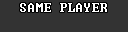
<style>
.page{position:relative;width:128px;height:32px;background:#333333}
.page>*{position:absolute;margin:0}
.t1{font:14px "Terminal";color:#ffffff}
</style>
<div class="page">
<p class="t1" style="left:20px;top:3px;width:87px;height:9px">SAME PLAYER</p>
</div>
